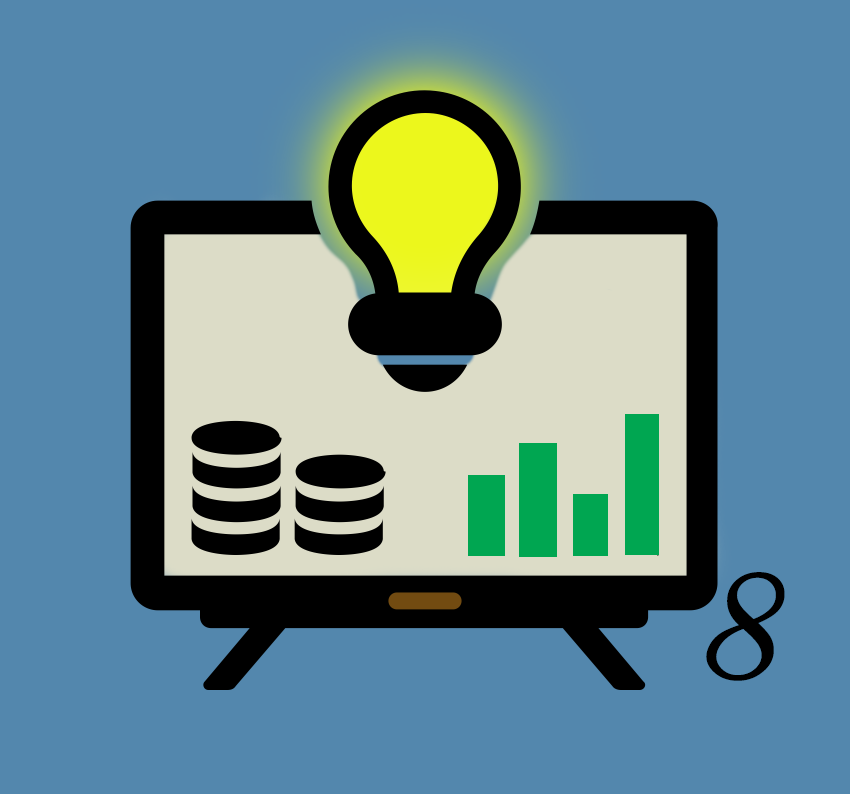
<style>
.page{position:relative;width:850px;height:794px;background:#5387ad}
.page>*{position:absolute;margin:0}
.t1{font:154.1px "CenturySchoolbook-Italic";color:#000000}
</style>
<div class="page">
<p class="t1" style="left:706px;top:572px;width:79px;height:109px">8</p>
</div>
